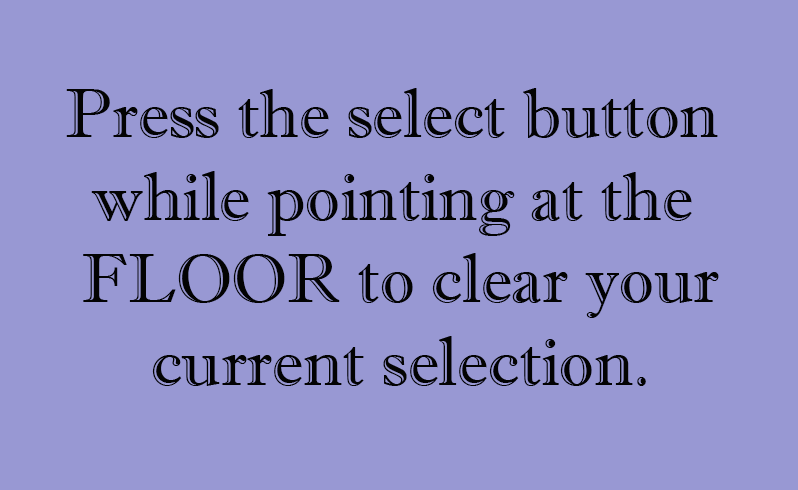
<style>
.page{position:relative;width:798px;height:490px;background:#9898d3}
.page>*{position:absolute;margin:0}
.t1{font:68.7px "ImprintMT-Shadow";color:#030303}
</style>
<div class="page">
<p class="t1" style="left:66px;top:88px;width:653px;height:298px;text-align:center">Press the select button <br>while pointing at the <br>FLOOR to clear your<br>current selection.</p>
</div>
